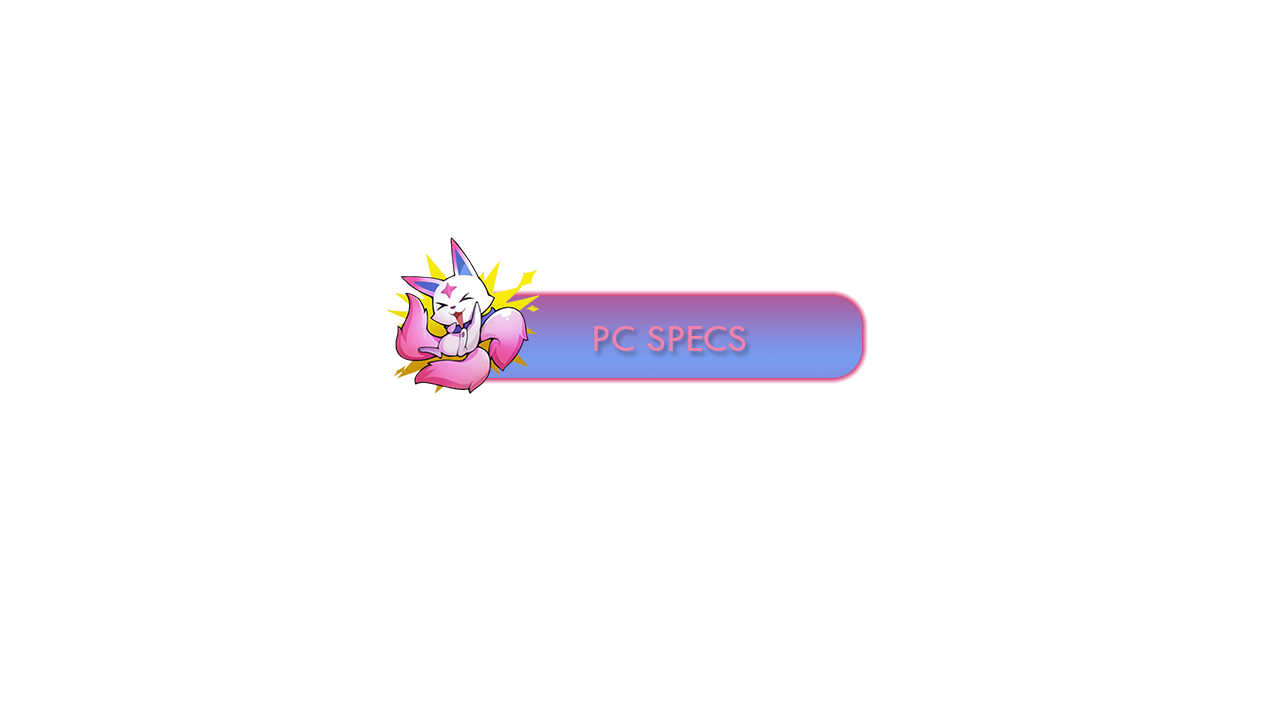
<style>
.page{position:relative;width:1280px;height:720px;background:#ffffff}
.page>*{position:absolute;margin:0}
.t1{font:40px "TwCenMT-Regular";color:#f082ab}
</style>
<div class="page">
<p class="t1" style="left:594px;top:326px;width:152px;height:25px">PC SPECS</p>
</div>
